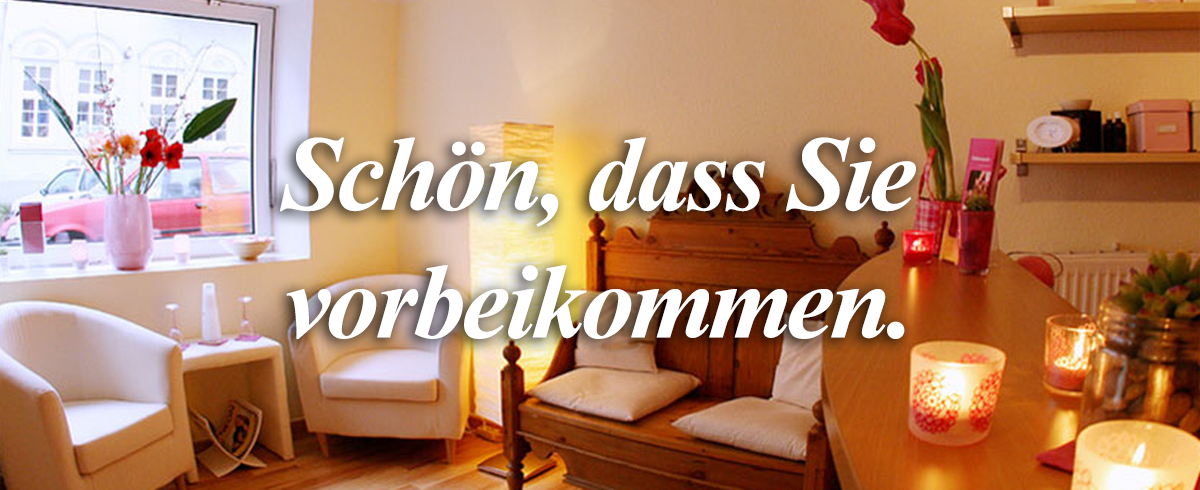
<style>
.page{position:relative;width:1200px;height:490px}
.page>*{position:absolute;margin:0}
.t1{font:106.5px "TimesNewRomanPS-BoldItalicMT";letter-spacing:-0.025em;color:#ffffff}
</style>
<div class="page">
<p class="t1" style="left:280px;top:137px;width:636px;height:202px;text-align:center">Schön, dass Sie<br>vorbeikommen.</p>
</div>
